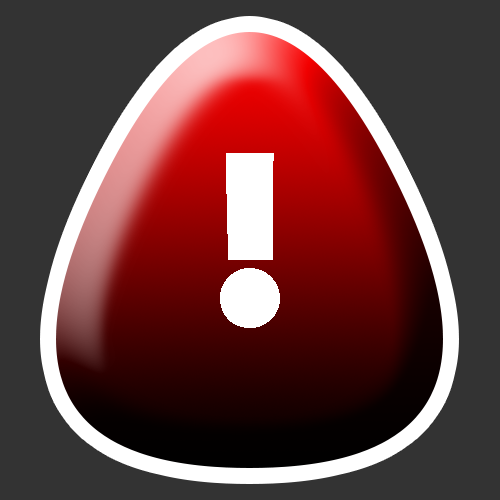
<style>
.page{position:relative;width:500px;height:500px;background:#333333}
.page>*{position:absolute;margin:0}
.t1{font:257.7px "Bauhaus93";color:#ffffff}
</style>
<div class="page">
<p class="t1" style="left:220px;top:153px;width:60px;height:175px">!</p>
</div>
